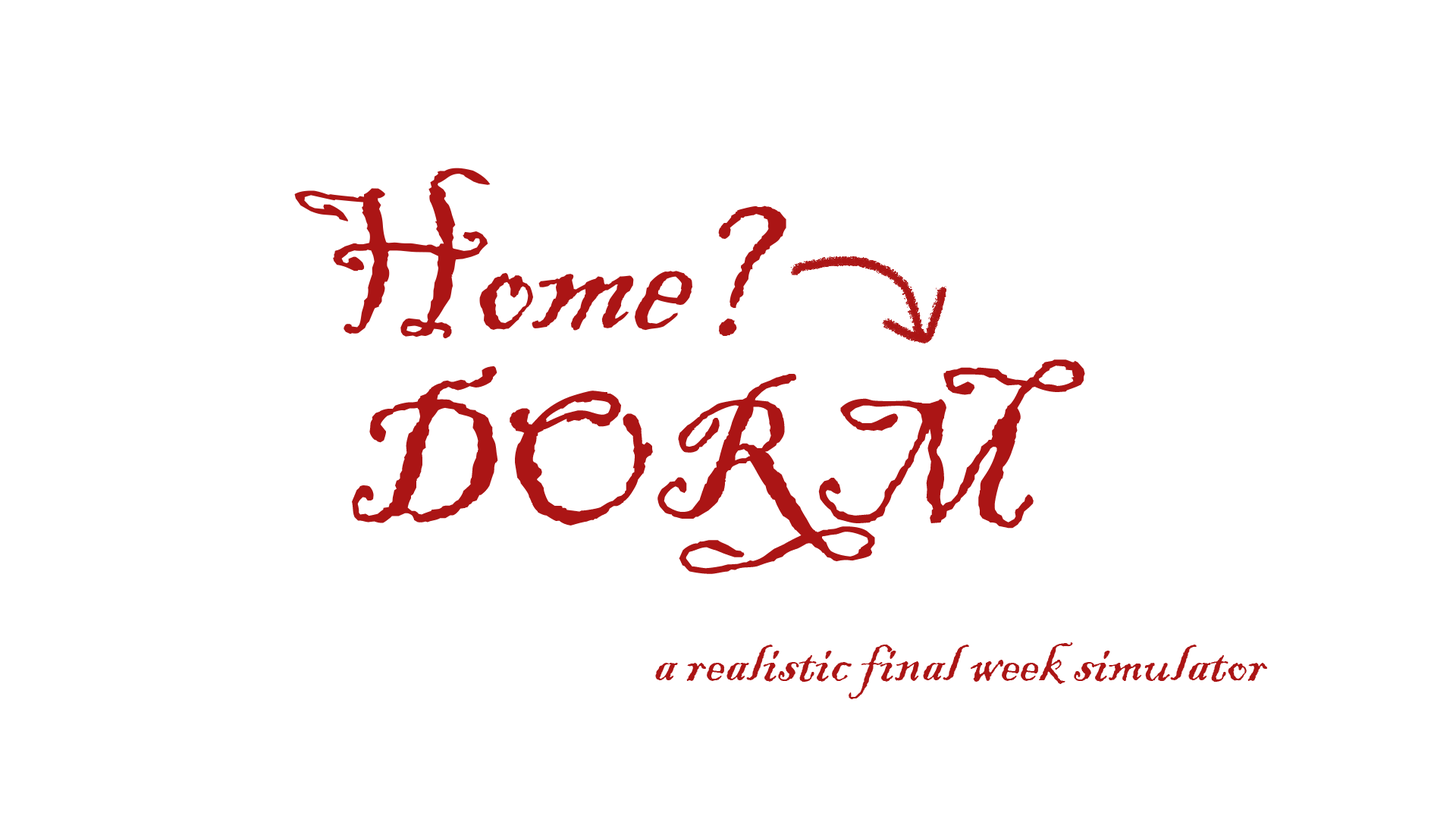
<style>
.page{position:relative;width:1456px;height:819px;background:#ffffff}
.page>*{position:absolute;margin:0}
.t1{font:189.6px "BlackadderITC-Regular";color:#ab1515}
.t2{font:63.2px "BlackadderITC-Regular";color:#ab1515}
</style>
<div class="page">
<p class="t1" style="left:294px;top:168px;width:399px;height:171px">Home</p>
<p class="t1" style="left:352px;top:359px;width:733px;height:215px">DORM</p>
<p class="t2" style="left:655px;top:642px;width:612px;height:57px">a realistic final week simulator</p>
</div>
